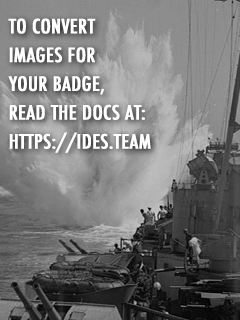
<style>
.page{position:relative;width:240px;height:320px}
.page>*{position:absolute;margin:0}
.t1{font:19.2px "Futura-CondensedMedium";color:#ffffff;font-weight:bold;scale:1.1 1}
.t2{font:28.8px "Futura-CondensedMedium";color:#ffffff;font-weight:bold;scale:1.1 1}
</style>
<div class="page">
<p class="t1" style="left:8px;top:18px;width:143px;height:135px"><span class="t2"><br></span>TO CONVERT<br>IMAGES FOR<br>YOUR BADGE,<br>READ THE DOCS AT:<br>HTTPS://IDES.TEAM</p>
</div>
